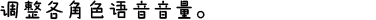
<style>
.page{position:relative;width:376px;height:20px;background:#ffffff}
.page>*{position:absolute;margin:0}
.t1{font:22px "¢è?";letter-spacing:0.1em;color:#000000}
</style>
<div class="page">
<p class="t1" style="left:0px;top:0px;width:205px;height:20px">调整各角色语音音量。</p>
</div>
